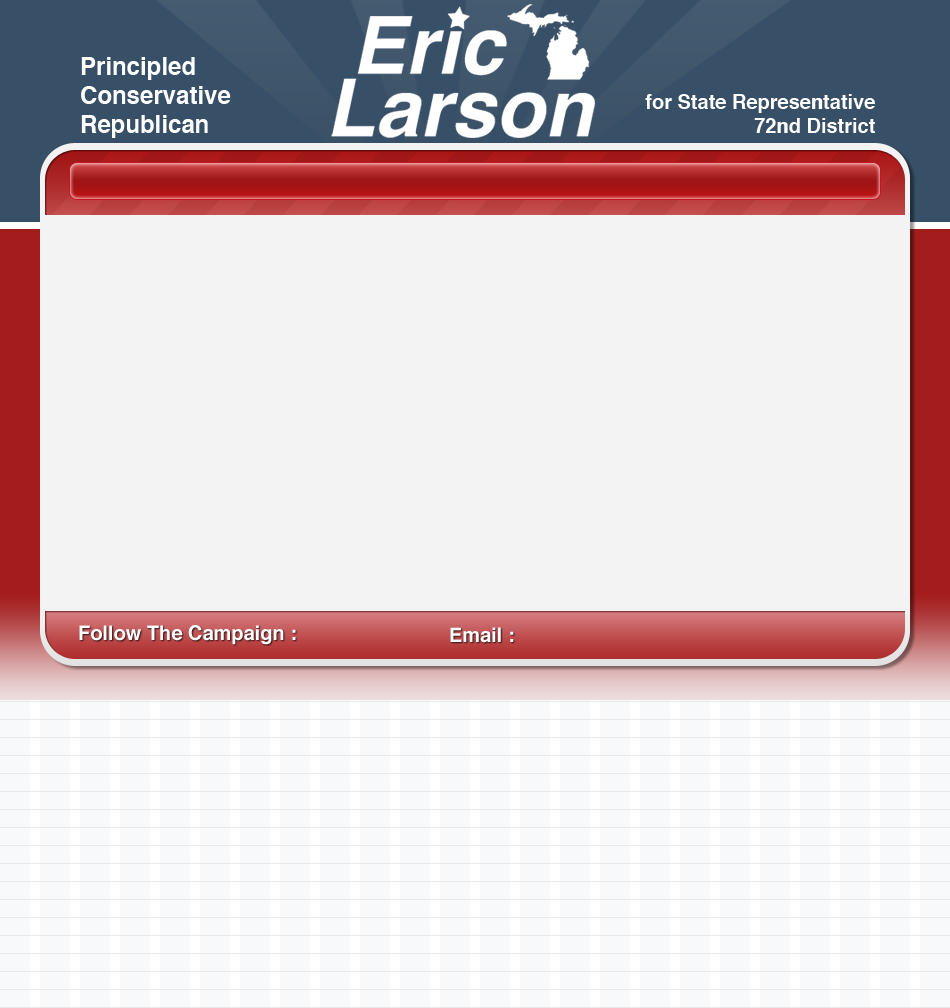
<style>
.page{position:relative;width:950px;height:1008px;background:#f3f3f3}
.page>*{position:absolute;margin:0}
.t1{font:24px "Helvetica-Bold";color:#ffffff}
.t2{font:20px "Helvetica-Bold";color:#ffffff}
</style>
<div class="page">
<p class="t1" style="left:81px;top:57px;width:150px;height:81px">Principled<br>Conservative<br>Republican</p>
<p class="t2" style="left:645px;top:94px;width:230px;height:39px;text-align:right">for State Representative<br>72nd District</p>
<p class="t2" style="left:79px;top:625px;width:217px;height:20px">Follow The Campaign :</p>
<p class="t2" style="left:450px;top:627px;width:64px;height:16px">Email :</p>
</div>
